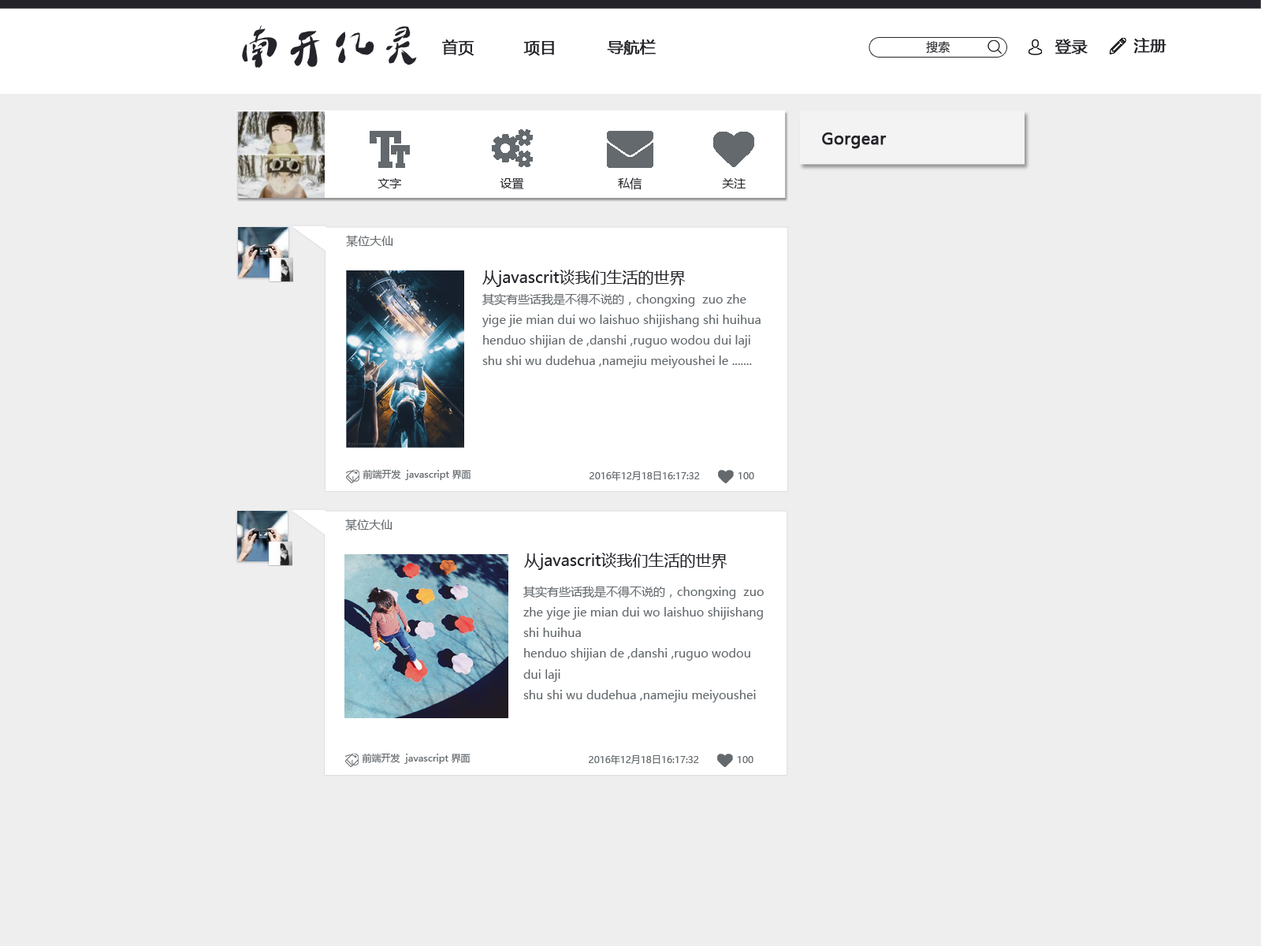
<style>
.page{position:relative;width:1261px;height:946px;background:#eeeeee}
.page>*{position:absolute;margin:0}
.t1{font:47.3px "DLTZkDLF";color:#24242a}
.t2{font:15.8px "MicrosoftYaHei";color:#24242a;font-weight:bold}
.t3{font:11.8px "MicrosoftYaHei";color:#24242a}
.t4{font:11.8px "MicrosoftYaHei";color:#63696d}
.t5{font:15.8px "MicrosoftYaHei";color:#24242a}
.t6{font:9.5px "MicrosoftYaHei";color:#63696d}
</style>
<div class="page">
<p class="t1" style="left:242px;top:25px;width:175px;height:43px">南开亿灵</p>
<p class="t2" style="left:442px;top:39px;width:32px;height:17px">首页</p>
<p class="t2" style="left:523px;top:41px;width:31px;height:15px">项目</p>
<p class="t2" style="left:607px;top:39px;width:49px;height:16px">导航栏</p>
<p class="t3" style="left:926px;top:41px;width:24px;height:13px">搜索</p>
<p class="t2" style="left:1054px;top:39px;width:34px;height:15px">登录</p>
<p class="t2" style="left:1133px;top:38px;width:33px;height:16px">注册</p>
<p class="t2" style="left:822px;top:132px;width:65px;height:17px">Gorgear</p>
<p class="t3" style="left:377px;top:178px;width:25px;height:10px">文字</p>
<p class="t3" style="left:500px;top:178px;width:24px;height:11px">设置</p>
<p class="t3" style="left:618px;top:177px;width:23px;height:13px">私信</p>
<p class="t3" style="left:722px;top:178px;width:24px;height:10px">关注</p>
<p class="t4" style="left:346px;top:235px;width:47px;height:12px">某位大仙</p>
<p class="t5" style="left:482px;top:270px;width:204px;height:17px">从javascrit谈我们生活的世界</p>
<p class="t4" style="left:482px;top:293px;width:278px;height:75px">其实有些话我是不得不说的，chongxing  zuo zhe yige jie mian dui wo laishuo shijishang shi huihua<br>henduo shijian de ,danshi ,ruguo wodou dui laji <br>shu shi wu dudehua ,namejiu meiyoushei le .......</p>
<p class="t6" style="left:363px;top:469px;width:108px;height:11px">前端开发  javascript 界面</p>
<p class="t6" style="left:589px;top:470px;width:111px;height:11px">2016年12月18日16:17:32</p>
<p class="t6" style="left:738px;top:472px;width:16px;height:7px">100</p>
<p class="t4" style="left:345px;top:519px;width:47px;height:12px">某位大仙</p>
<p class="t5" style="left:524px;top:552px;width:203px;height:18px">从javascrit谈我们生活的世界</p>
<p class="t4" style="left:523px;top:586px;width:241px;height:116px">其实有些话我是不得不说的，chongxing  zuo zhe yige jie mian dui wo laishuo shijishang shi huihua<br>henduo shijian de ,danshi ,ruguo wodou dui laji <br>shu shi wu dudehua ,namejiu meiyoushei le .......</p>
<p class="t6" style="left:362px;top:753px;width:108px;height:11px">前端开发  javascript 界面</p>
<p class="t6" style="left:589px;top:754px;width:110px;height:10px">2016年12月18日16:17:32</p>
<p class="t6" style="left:737px;top:756px;width:16px;height:7px">100</p>
</div>
